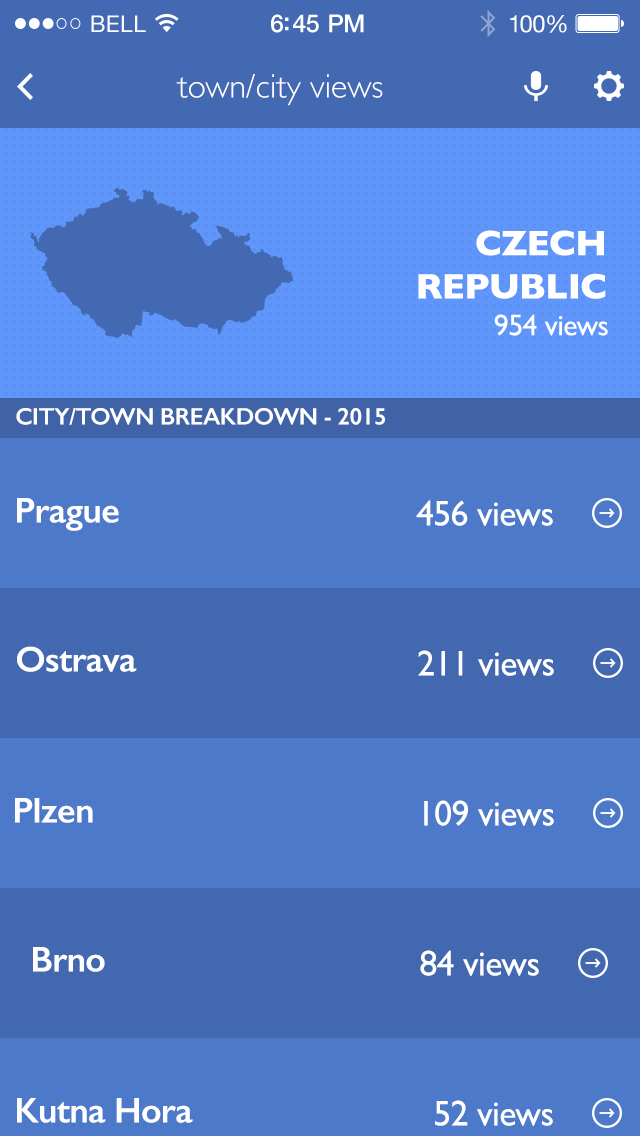
<style>
.page{position:relative;width:640px;height:1136px;background:#4369b2}
.page>*{position:absolute;margin:0}
.t1{font:34px "GillSans-Light";color:#ffffff}
.t2{font:36px "GillSans-Bold";letter-spacing:-0.02em;color:#ffffff}
.t3{font:30px "GillSans";letter-spacing:-0.02em;color:#ffffff}
.t4{font:24px "GillSans-SemiBold";letter-spacing:-0.02em;color:#ffffff}
.t5{font:36px "GillSans-SemiBold";letter-spacing:-0.02em;color:#ffffff}
.t6{font:36px "GillSans";letter-spacing:-0.02em;color:#ffffff}
</style>
<div class="page">
<p class="t1" style="left:176px;top:74px;width:207px;height:32px">town/city views</p>
<p class="t2" style="left:418px;top:230px;width:188px;height:69px;text-align:right">CZECH REPUBLIC</p>
<p class="t3" style="left:494px;top:314px;width:114px;height:22px">954 views</p>
<p class="t4" style="left:16px;top:408px;width:369px;height:17px">CITY/TOWN BREAKDOWN - 2015</p>
<p class="t5" style="left:17px;top:498px;width:102px;height:33px">Prague</p>
<p class="t6" style="left:416px;top:500px;width:137px;height:26px">456 views</p>
<p class="t5" style="left:17px;top:646px;width:120px;height:26px">Ostrava</p>
<p class="t6" style="left:418px;top:650px;width:136px;height:26px">211 views</p>
<p class="t5" style="left:15px;top:798px;width:78px;height:25px">Plzen</p>
<p class="t6" style="left:424px;top:800px;width:130px;height:26px">109 views</p>
<p class="t5" style="left:33px;top:947px;width:72px;height:25px">Brno</p>
<p class="t6" style="left:420px;top:950px;width:119px;height:26px">84 views</p>
<p class="t5" style="left:17px;top:1098px;width:176px;height:25px">Kutna Hora</p>
<p class="t6" style="left:435px;top:1100px;width:118px;height:26px">52 views</p>
</div>
